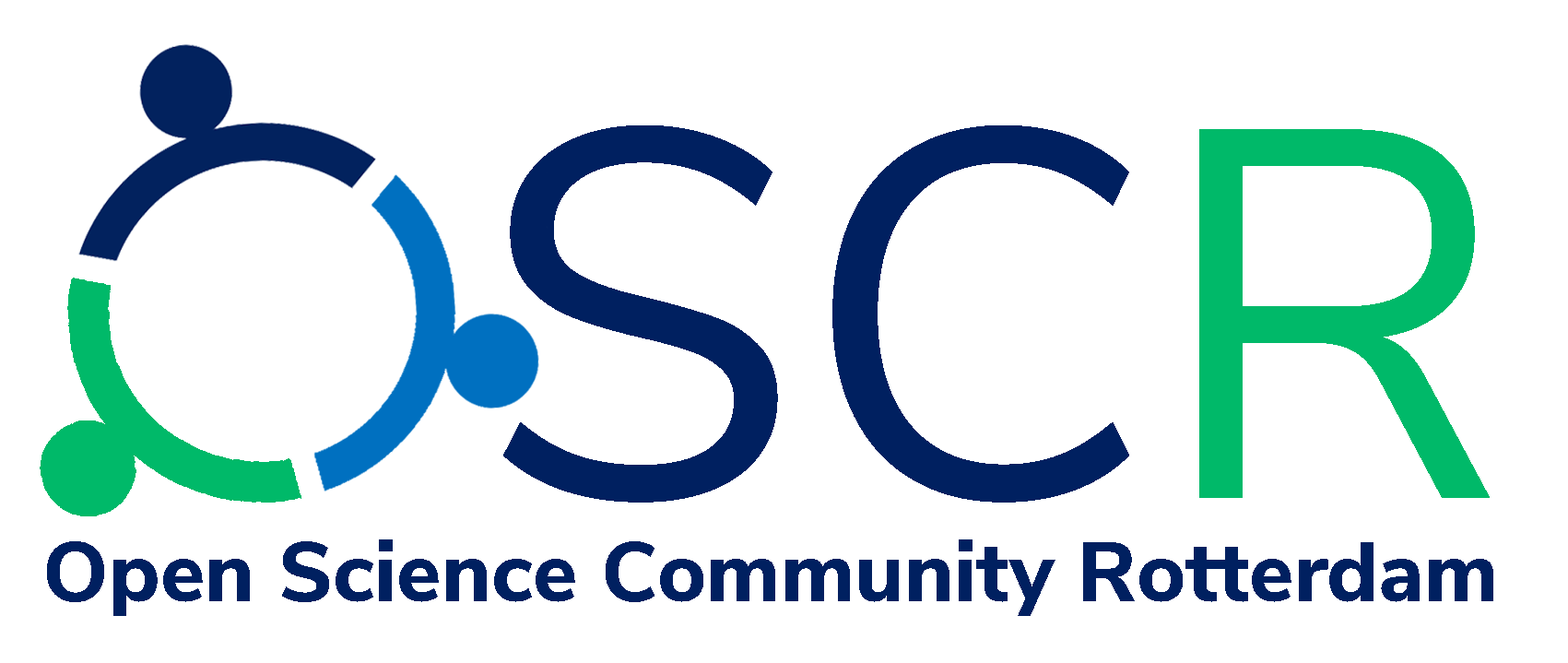
<style>
.page{position:relative;width:1568px;height:663px;background:#ffffff}
.page>*{position:absolute;margin:0}
.t1{font:521.7px "NunitoSans-Regular";color:#002060}
.t2{font:521.7px "NunitoSans-Regular";color:#00b969}
.t3{font:83.9px "NunitoSans-ExtraBold";color:#002060}
</style>
<div class="page">
<p class="t1" style="left:503px;top:125px;width:987px;height:377px">SC<span class="t2">R</span></p>
<p class="t3" style="left:47px;top:539px;width:1446px;height:77px">Open Science Community Rotterdam</p>
</div>
